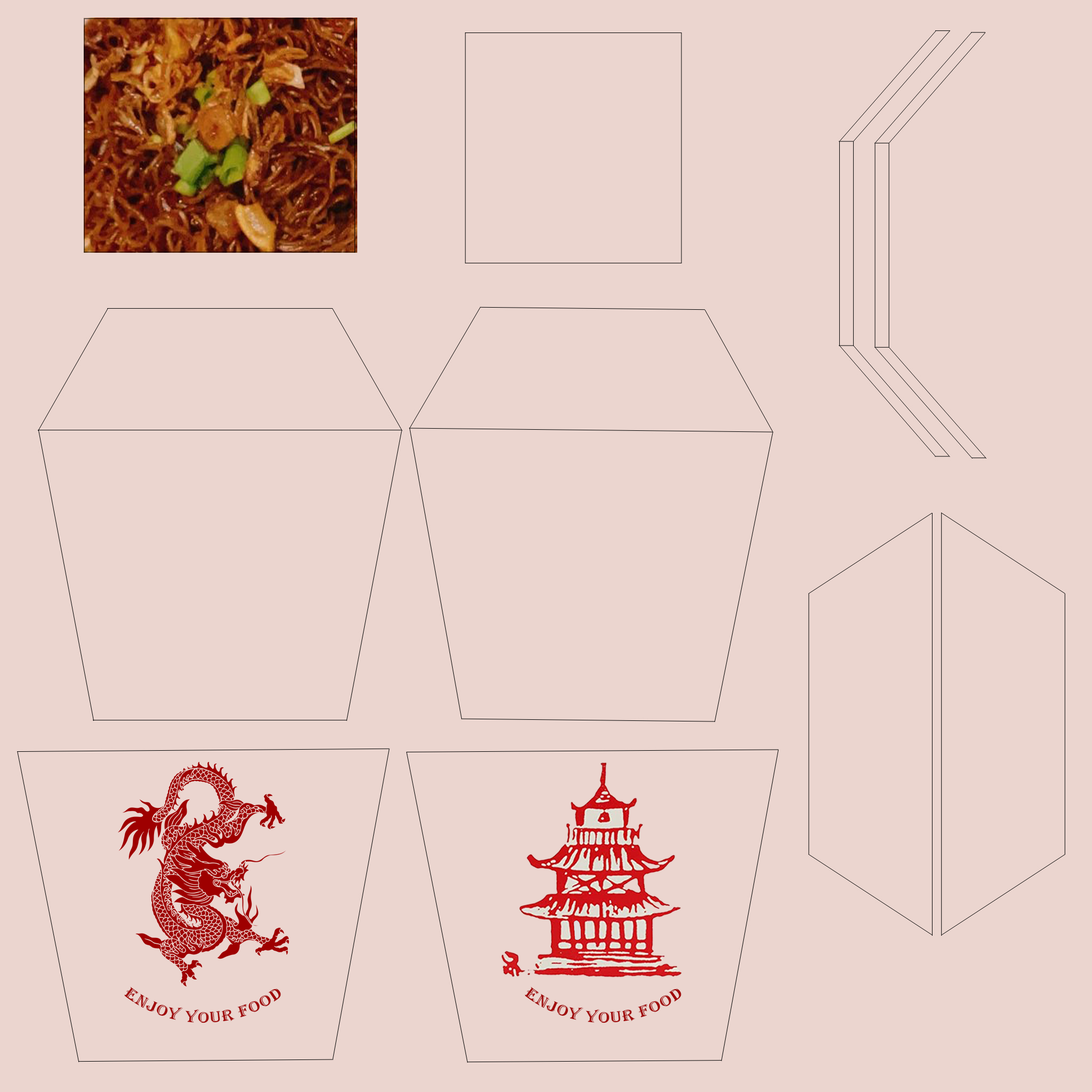
<style>
.page{position:relative;width:1092px;height:1092px;background:#ebd5cf}
.page>*{position:absolute;margin:0}
.t1{font:16px "Algerian";letter-spacing:0.025em;color:#a10a0a}
</style>
<div class="page">
<p class="t1" style="left:124px;top:986px;width:157px;height:37px;text-align:justify">Enjoy your Food</p>
<p class="t1" style="left:524px;top:986px;width:157px;height:37px;text-align:justify">Enjoy your Food</p>
</div>
